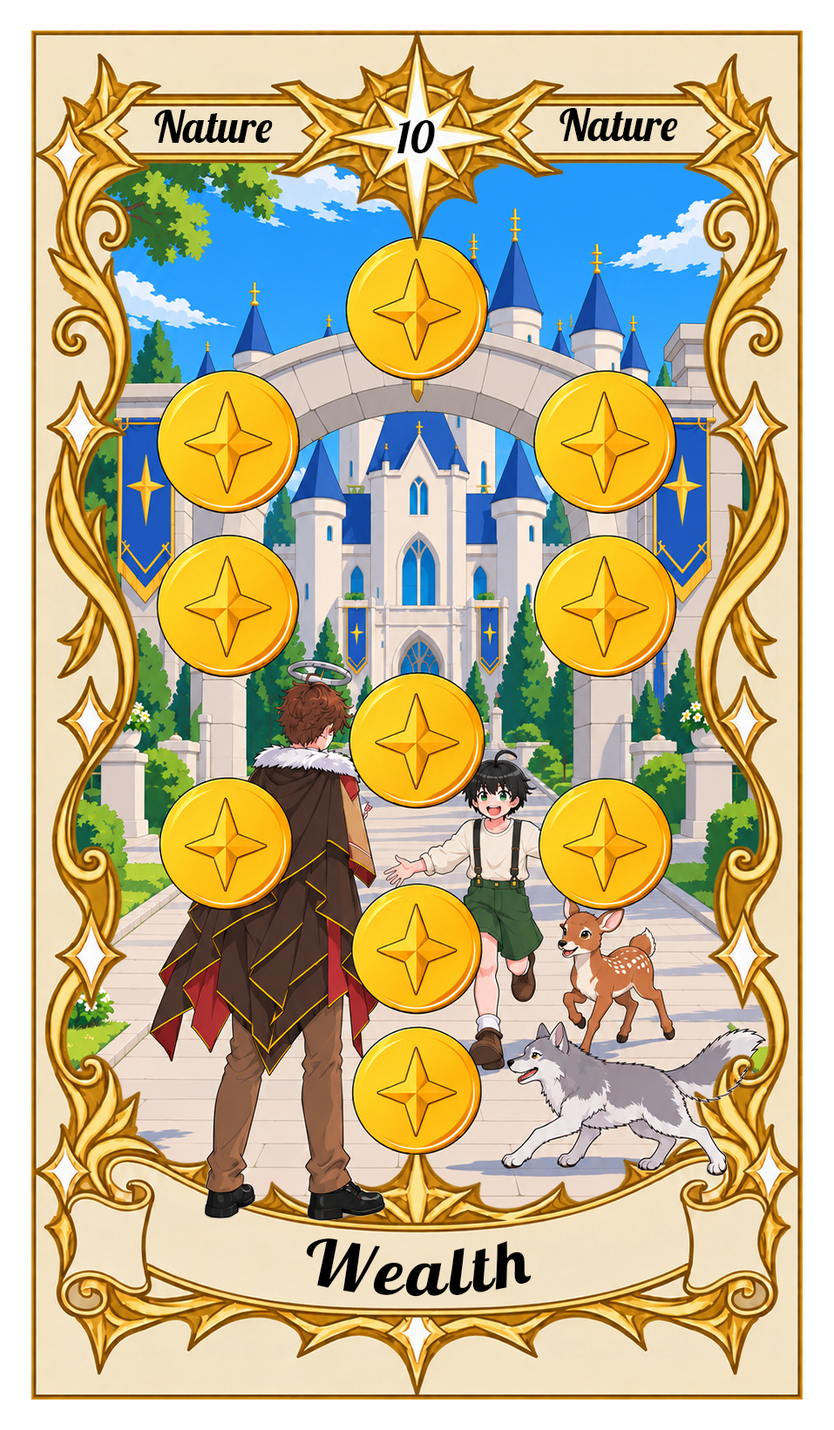
<style>
.page{position:relative;width:834px;height:1430px}
.page>*{position:absolute;margin:0}
.t1{font:43.6px "Lobster-Regular";color:#000000}
.t2{font:65.3px "Lobster-Regular";letter-spacing:0.05em;color:#000000}
</style>
<div class="page">
<p class="t1" style="left:154px;top:110px;width:119px;height:33px">Nature</p>
<p class="t1" style="left:559px;top:108px;width:119px;height:33px">Nature</p>
<p class="t1" style="left:397px;top:120px;width:38px;height:33px">10</p>
<p class="t2" style="left:306px;top:1239px;width:225px;height:58px">Wealth</p>
</div>
